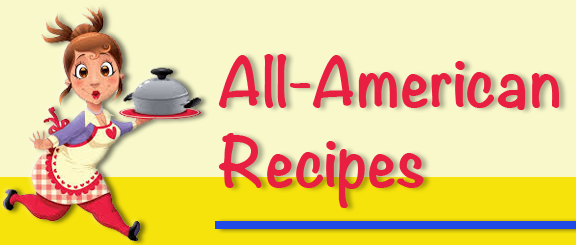
<style>
.page{position:relative;width:576px;height:245px;background:#f8f8ca}
.page>*{position:absolute;margin:0}
.t1{font:62px/80px "Noteworthy-Bold";color:#e81f41}
.t2{font:62px/80px "Noteworthy-Bold";letter-spacing:-0.04em;color:#e81f41}
</style>
<div class="page">
<p class="t1" style="left:218px;top:54px;width:341px;height:154px">All<span class="t2">-</span>American<br>Recipes</p>
</div>
